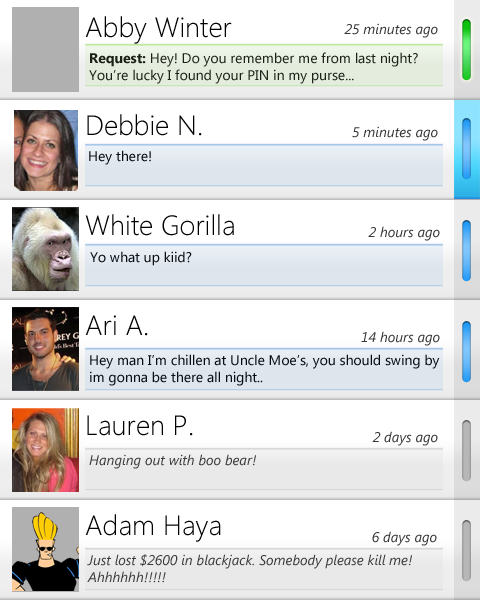
<style>
.page{position:relative;width:480px;height:600px;background:#ffffff}
.page>*{position:absolute;margin:0}
.t1{font:28px "SegoeUI-Light";color:#000000}
.t2{font:14px "SegoeUI-Italic";color:#353535}
.t3{font:14px "SegoeUI";color:#121212}
.t4{font:14px "SegoeUI-Bold";color:#121212}
.t5{font:14px "SegoeUI-Italic";color:#2270e1}
.t6{font:14px "SegoeUI";color:#000000}
.t7{font:14px "SegoeUI";color:#010101}
</style>
<div class="page">
<p class="t1" style="left:85px;top:16px;width:147px;height:28px">Abby Winter</p>
<p class="t2" style="left:344px;top:23px;width:94px;height:15px">25 minutes ago</p>
<p class="t3" style="left:89px;top:52px;width:329px;height:32px"><span class="t4">Request: </span>Hey! Do you remember me from last night? <br>You’re lucky I found your PIN in my purse...</p>
<p class="t1" style="left:87px;top:114px;width:115px;height:22px">Debbie N.</p>
<p class="t2" style="left:352px;top:126px;width:86px;height:15px"><span class="t5"><br></span>5 minutes ago</p>
<p class="t6" style="left:89px;top:150px;width:62px;height:15px">Hey there!</p>
<p class="t1" style="left:85px;top:214px;width:149px;height:22px">White Gorilla</p>
<p class="t2" style="left:368px;top:226px;width:72px;height:15px">2 hours ago</p>
<p class="t7" style="left:90px;top:251px;width:102px;height:15px">Yo what up kiid?</p>
<p class="t1" style="left:85px;top:315px;width:63px;height:21px">Ari A.</p>
<p class="t2" style="left:361px;top:331px;width:79px;height:15px">14 hours ago</p>
<p class="t6" style="left:90px;top:354px;width:350px;height:32px">Hey man I’m chillen at Uncle Moe’s, you should swing by<br>im gonna be there all night..</p>
<p class="t1" style="left:87px;top:415px;width:106px;height:21px">Lauren P.</p>
<p class="t2" style="left:372px;top:431px;width:66px;height:15px">2 days ago</p>
<p class="t2" style="left:89px;top:454px;width:167px;height:15px">Hanging out with boo bear!</p>
<p class="t1" style="left:85px;top:514px;width:136px;height:28px">Adam Haya</p>
<p class="t2" style="left:372px;top:531px;width:65px;height:15px">6 days ago</p>
<p class="t2" style="left:87px;top:554px;width:325px;height:29px">Just lost $2600 in blackjack. Somebody please kill me! <br>Ahhhhhh!!!!!</p>
</div>
